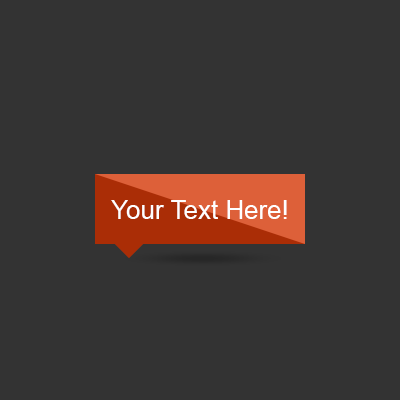
<style>
.page{position:relative;width:400px;height:400px;background:#333333}
.page>*{position:absolute;margin:0}
.t1{font:26px "ArialMT";color:#ffffff}
</style>
<div class="page">
<p class="t1" style="left:111px;top:200px;width:176px;height:19px">Your Text Here!</p>
</div>
